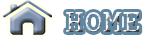
<style>
.page{position:relative;width:160px;height:50px;background:#ffffff}
.page>*{position:absolute;margin:0}
.t1{font:32px "PrestigeEliteStd-Bd"}
</style>
<div class="page">
<p class="t1" style="left:66px;top:12px;width:74px;height:20px">HOME</p>
</div>
